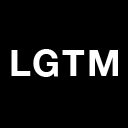
<style>
.page{position:relative;width:128px;height:128px;background:#000000}
.page>*{position:absolute;margin:0}
.t1{font:37px "HelveticaNeue-Bold";letter-spacing:0.05em;color:#fefefe}
</style>
<div class="page">
<p class="t1" style="left:11px;top:49px;width:107px;height:28px">LGTM</p>
</div>
